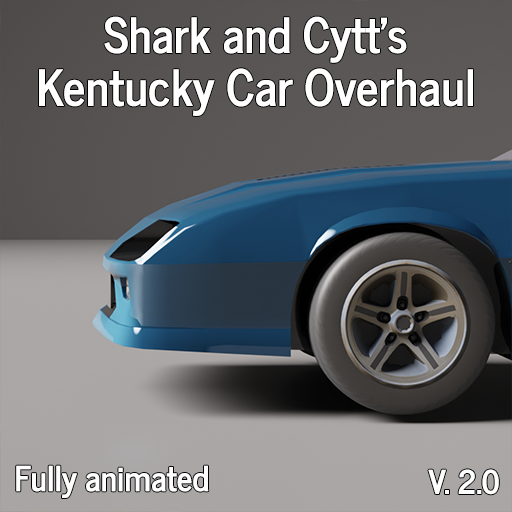
<style>
.page{position:relative;width:512px;height:512px}
.page>*{position:absolute;margin:0}
.t1{font:47.9px "NewsCycle-Bold";color:#ffffff}
.t2{font:49.3px "NewsCycle-Bold";color:#ffffff}
.t3{font:34.1px "NewsCycle-Bold";color:#ffffff}
.t4{font:32.3px "NewsCycle-Bold";color:#ffffff}
</style>
<div class="page">
<p class="t1" style="left:104px;top:16px;width:303px;height:47px">Shark and Cytt’s</p>
<p class="t2" style="left:39px;top:68px;width:434px;height:48px">Kentucky Car Overhaul</p>
<p class="t3" style="left:16px;top:465px;width:193px;height:33px">Fully animated</p>
<p class="t4" style="left:428px;top:469px;width:71px;height:26px">V. 2.0</p>
</div>
